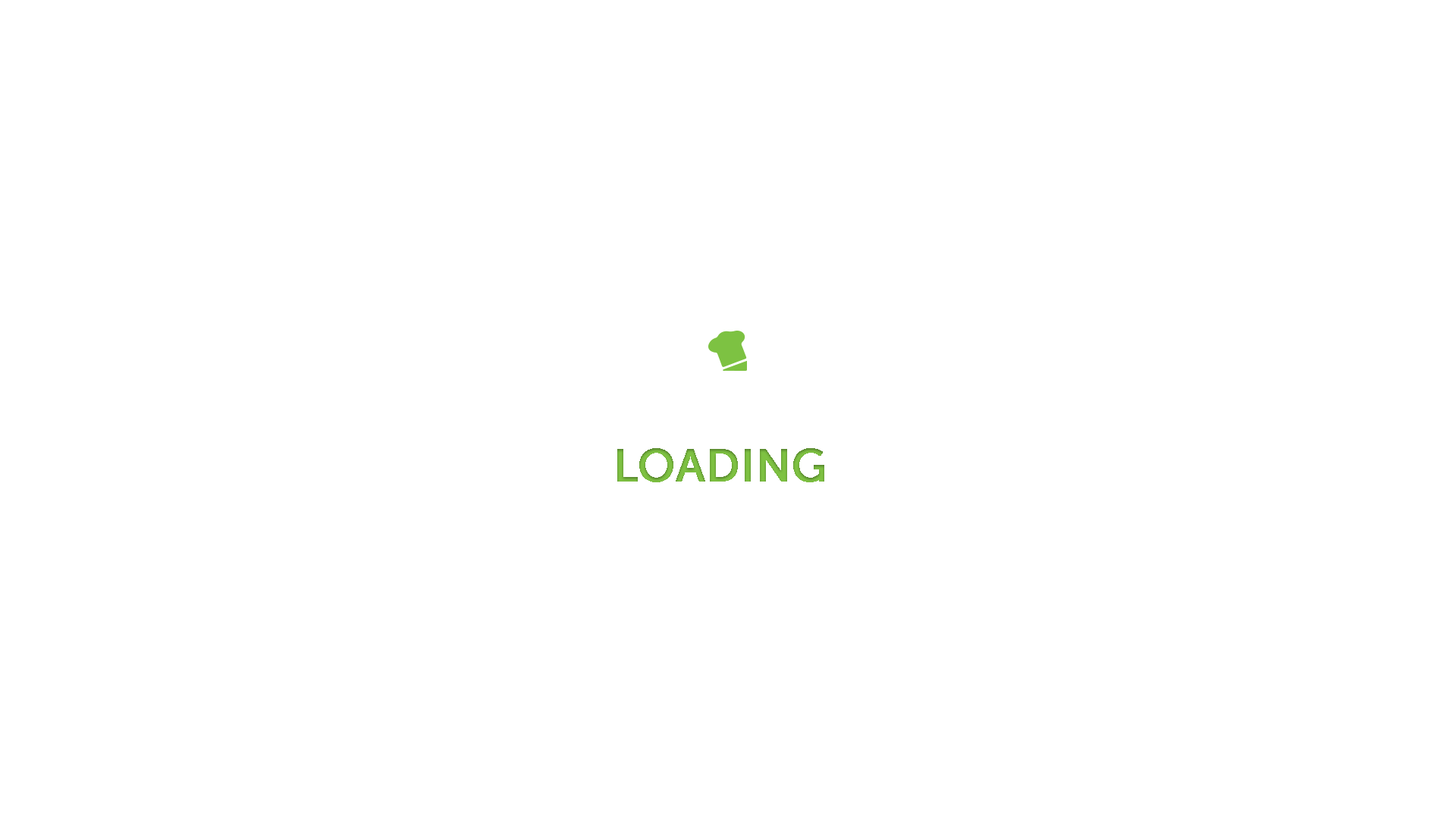
<style>
.page{position:relative;width:1456px;height:819px;background:#ffffff}
.page>*{position:absolute;margin:0}
.t1{font:45.4px "MuseoSans-500";color:#7ec242;font-weight:bold}
</style>
<div class="page">
<p class="t1" style="left:617px;top:448px;width:207px;height:34px">LOADING</p>
</div>
